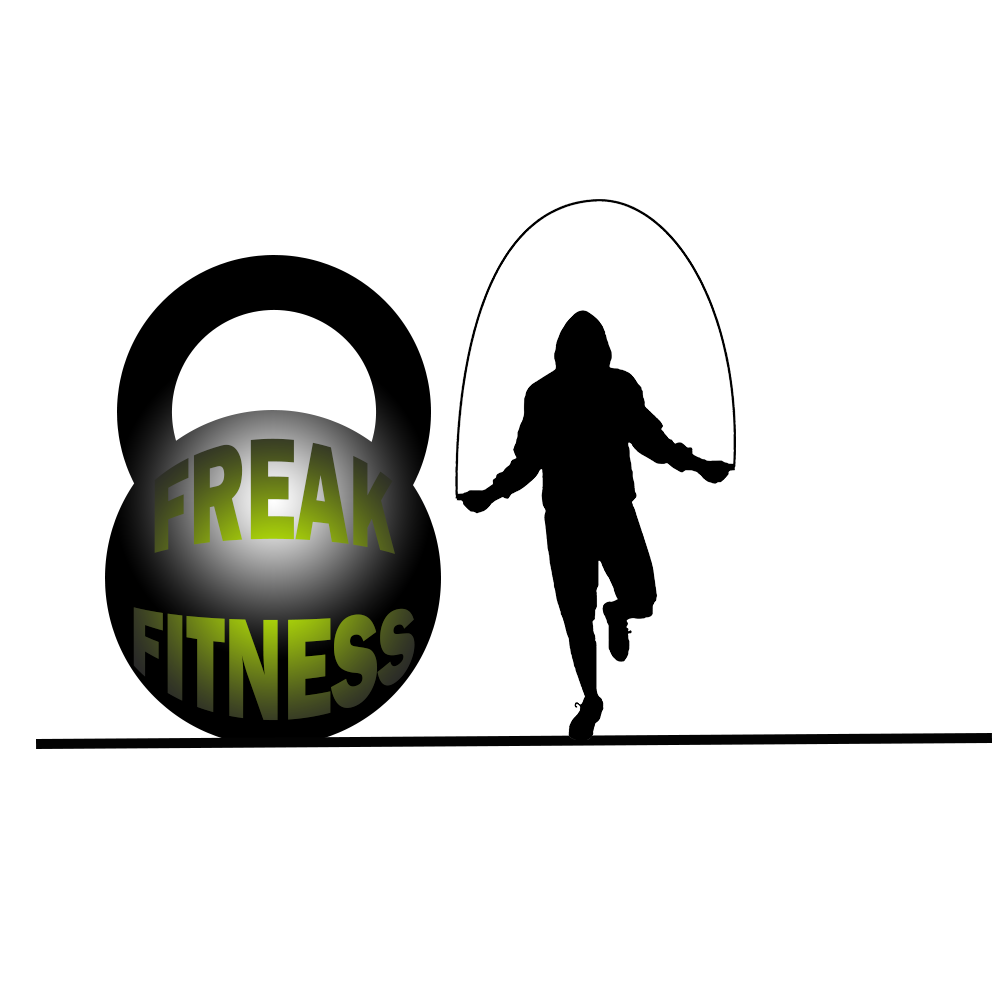
<style>
.page{position:relative;width:1000px;height:1000px;background:#ffffff}
.page>*{position:absolute;margin:0}
.t1{font:72.7px "FranklinGothic-Heavy"}
</style>
<div class="page">
<p class="t1" style="left:133px;top:438px;width:282px;height:283px;text-align:center">FREAK<br>FITNESS</p>
</div>
